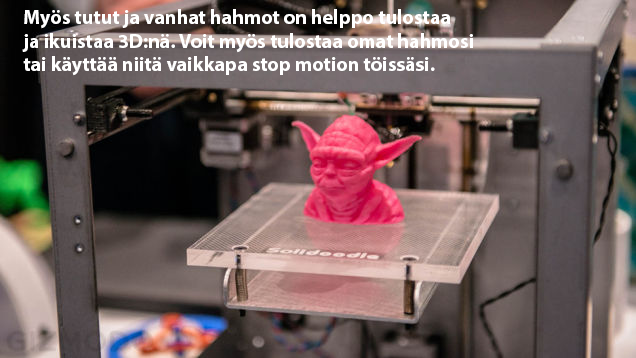
<style>
.page{position:relative;width:636px;height:358px}
.page>*{position:absolute;margin:0}
.t1{font:19.9px "MyriadPro-Bold";color:#ffffff}
</style>
<div class="page">
<p class="t1" style="left:22px;top:9px;width:451px;height:67px">Myös tutut ja vanhat hahmot on helppo tulostaa <br>ja ikuistaa 3D:nä. Voit myös tulostaa omat hahmosi<br>tai käyttää niitä vaikkapa stop motion töissäsi.</p>
</div>
